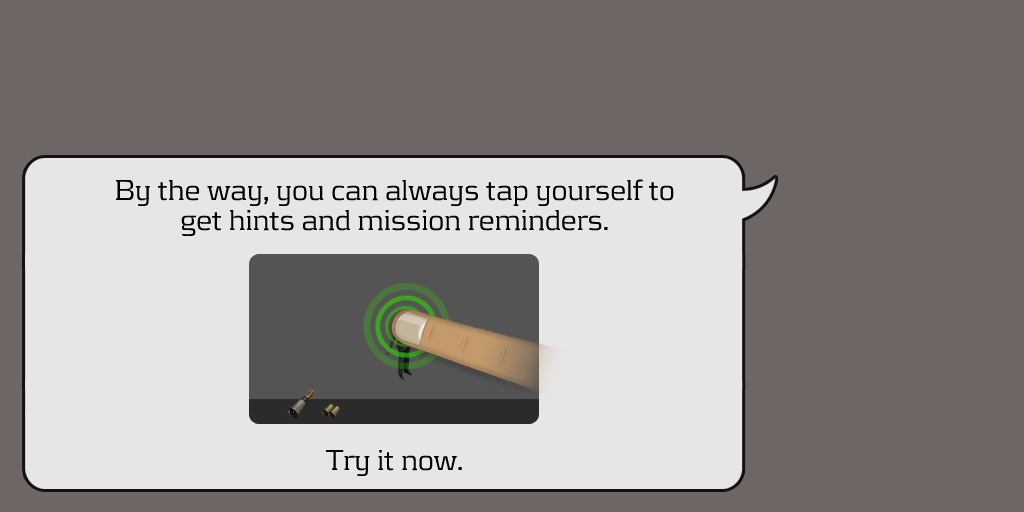
<style>
.page{position:relative;width:1024px;height:512px;background:#6e6665}
.page>*{position:absolute;margin:0}
.t1{font:30px/30px "KontrapunktLight";color:#000000}
</style>
<div class="page">
<p class="t1" style="left:116px;top:179px;width:558px;height:297px;text-align:center">By the way, you can always tap yourself to <br>get hints and mission reminders. <br><br><br><br><br><br><br><br>Try it now.</p>
</div>
